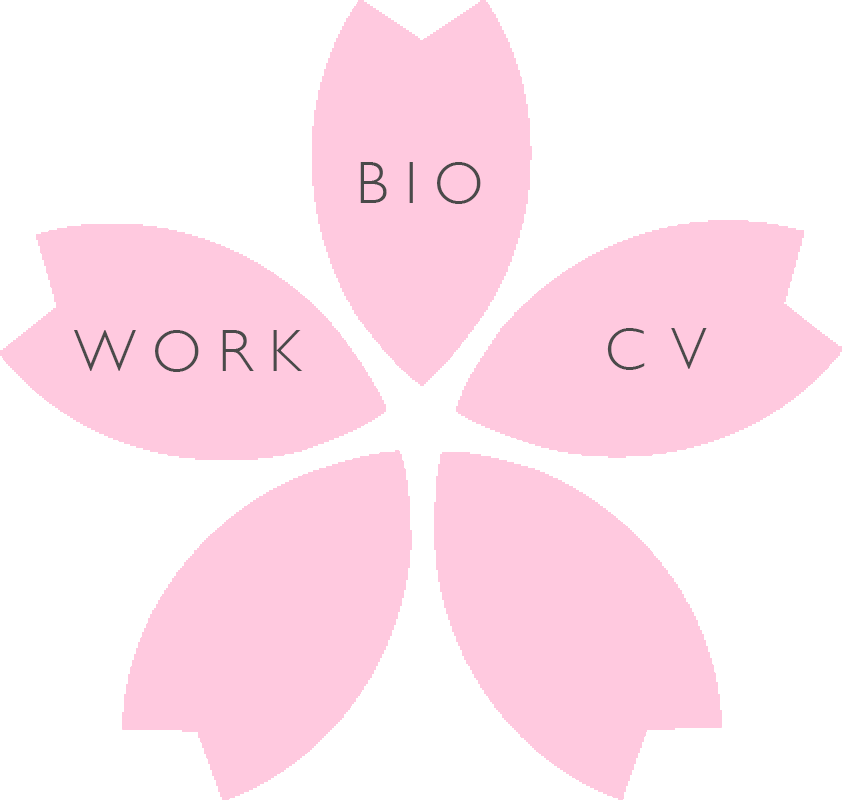
<style>
.page{position:relative;width:842px;height:800px;background:#ffffff}
.page>*{position:absolute;margin:0}
.t1{font:60px "GillSans-Light";color:#4a4a4a}
</style>
<div class="page">
<p class="t1" style="left:360px;top:162px;width:121px;height:42px">B I O</p>
<p class="t1" style="left:607px;top:328px;width:100px;height:42px">C  V</p>
<p class="t1" style="left:74px;top:330px;width:229px;height:42px">W O R K</p>
</div>
